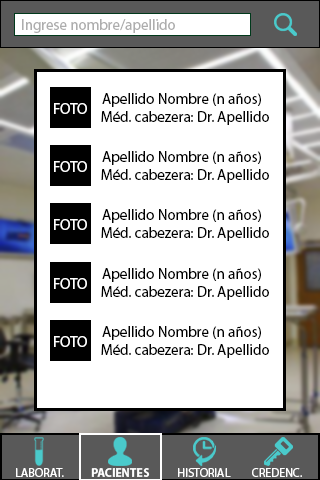
<style>
.page{position:relative;width:320px;height:480px;background:#ffffff}
.page>*{position:absolute;margin:0}
.t1{font:15px "MyriadPro-Regular";color:#adadad}
.t2{font:15px "MyriadPro-Regular";color:#000000}
.t3{font:15px "MyriadPro-Regular";color:#ffffff}
.t4{font:12px "MyriadPro-Regular";color:#ffffff}
.t5{font:12px "MyriadPro-Bold";color:#ffffff}
.t6{font:12px "MyriadPro-Regular";color:#fefefe}
</style>
<div class="page">
<p class="t1" style="left:22px;top:19px;width:153px;height:14px">Ingrese nombre/apellido</p>
<p class="t2" style="left:102px;top:93px;width:159px;height:14px">Apellido Nombre (n años)</p>
<p class="t3" style="left:54px;top:103px;width:33px;height:11px">FOTO</p>
<p class="t2" style="left:101px;top:111px;width:168px;height:14px">Méd. cabezera: Dr. Apellido</p>
<p class="t3" style="left:54px;top:161px;width:33px;height:11px">FOTO</p>
<p class="t2" style="left:102px;top:151px;width:159px;height:14px">Apellido Nombre (n años)</p>
<p class="t2" style="left:101px;top:169px;width:168px;height:14px">Méd. cabezera: Dr. Apellido</p>
<p class="t2" style="left:102px;top:209px;width:159px;height:14px">Apellido Nombre (n años)</p>
<p class="t3" style="left:54px;top:219px;width:33px;height:11px">FOTO</p>
<p class="t2" style="left:101px;top:227px;width:168px;height:14px">Méd. cabezera: Dr. Apellido</p>
<p class="t2" style="left:102px;top:268px;width:159px;height:14px">Apellido Nombre (n años)</p>
<p class="t3" style="left:54px;top:278px;width:33px;height:11px">FOTO</p>
<p class="t2" style="left:101px;top:286px;width:168px;height:14px">Méd. cabezera: Dr. Apellido</p>
<p class="t2" style="left:102px;top:326px;width:159px;height:14px">Apellido Nombre (n años)</p>
<p class="t3" style="left:54px;top:336px;width:33px;height:11px">FOTO</p>
<p class="t2" style="left:101px;top:344px;width:168px;height:14px">Méd. cabezera: Dr. Apellido</p>
<p class="t4" style="left:16px;top:468px;width:48px;height:9px">LABORAT.</p>
<p class="t5" style="left:91px;top:468px;width:59px;height:9px">PACIENTES</p>
<p class="t6" style="left:178px;top:468px;width:53px;height:9px">HISTORIAL</p>
<p class="t4" style="left:252px;top:468px;width:50px;height:9px">CREDENC.</p>
</div>
